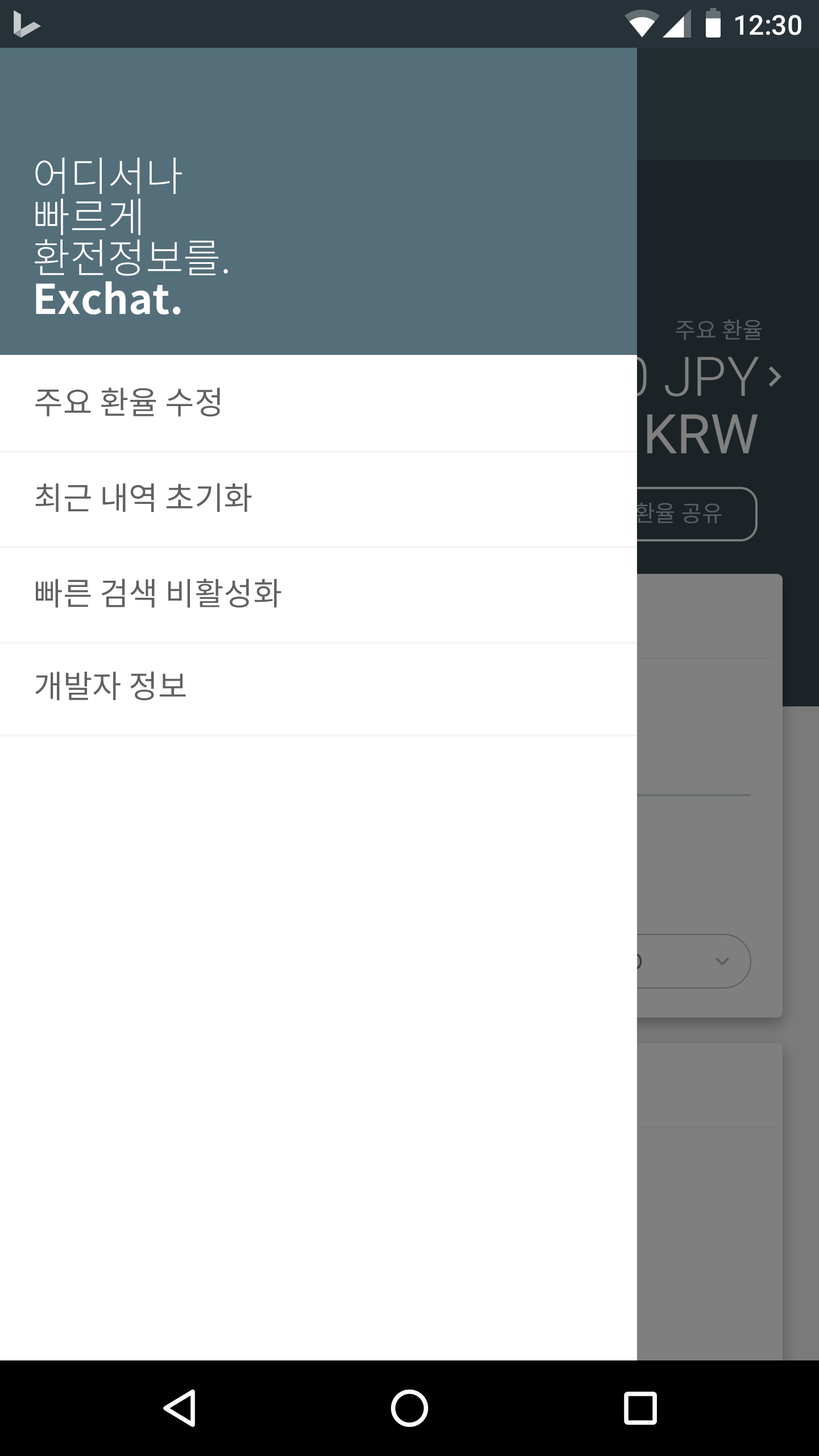
<style>
.page{position:relative;width:819px;height:1456px;background:#ffffff}
.page>*{position:absolute;margin:0}
.t1{font:27.3px "Roboto-Medium";color:#ffffff}
.t2{font:40.9px/40.9px "NotoSansCJKkr-Light";color:#ffffff}
.t3{font:40.9px/40.9px "NotoSansCJKkr-Bold";color:#ffffff}
.t4{font:22.7px "NotoSansCJKkr-Regular";color:#585f62}
.t5{font:31.8px "NotoSansCJKkr-Regular";color:#616161}
</style>
<div class="page">
<p class="t1" style="left:735px;top:15px;width:66px;height:20px">12:30</p>
<p class="t2" style="left:35px;top:158px;width:193px;height:157px">어디서나<br>빠르게<br>환전정보를.<br><span class="t3">Exchat.</span></p>
<p class="t4" style="left:676px;top:319px;width:86px;height:21px">주요 환율</p>
<p class="t5" style="left:35px;top:387px;width:185px;height:30px">주요 환율 수정</p>
<p class="t5" style="left:35px;top:483px;width:217px;height:29px">최근 내역 초기화</p>
<p class="t5" style="left:36px;top:578px;width:246px;height:30px">빠른 검색 비활성화</p>
<p class="t5" style="left:35px;top:671px;width:151px;height:30px">개발자 정보</p>
</div>
